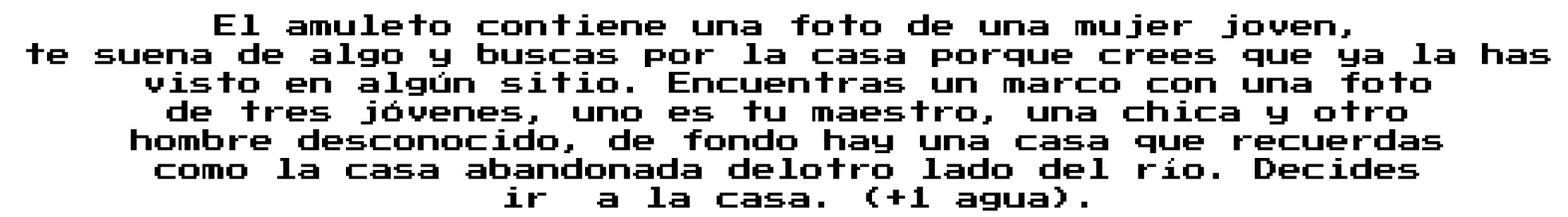
<style>
.page{position:relative;width:1568px;height:217px;background:#ffffff}
.page>*{position:absolute;margin:0}
.t1{font:23.9px "PressStart2P";color:#000000}
</style>
<div class="page">
<p class="t1" style="left:26px;top:14px;width:1525px;height:196px;text-align:center">El amuleto contiene una foto de una mujer joven, <br>te suena de algo y buscas por la casa porque crees que ya la has <br>visto en algún sitio. Encuentras un marco con una foto <br>de tres jóvenes, uno es tu maestro, una chica y otro <br>hombre desconocido, de fondo hay una casa que recuerdas <br>como la casa abandonada delotro lado del río. Decides <br>ir  a la casa. (+1 agua).</p>
</div>
